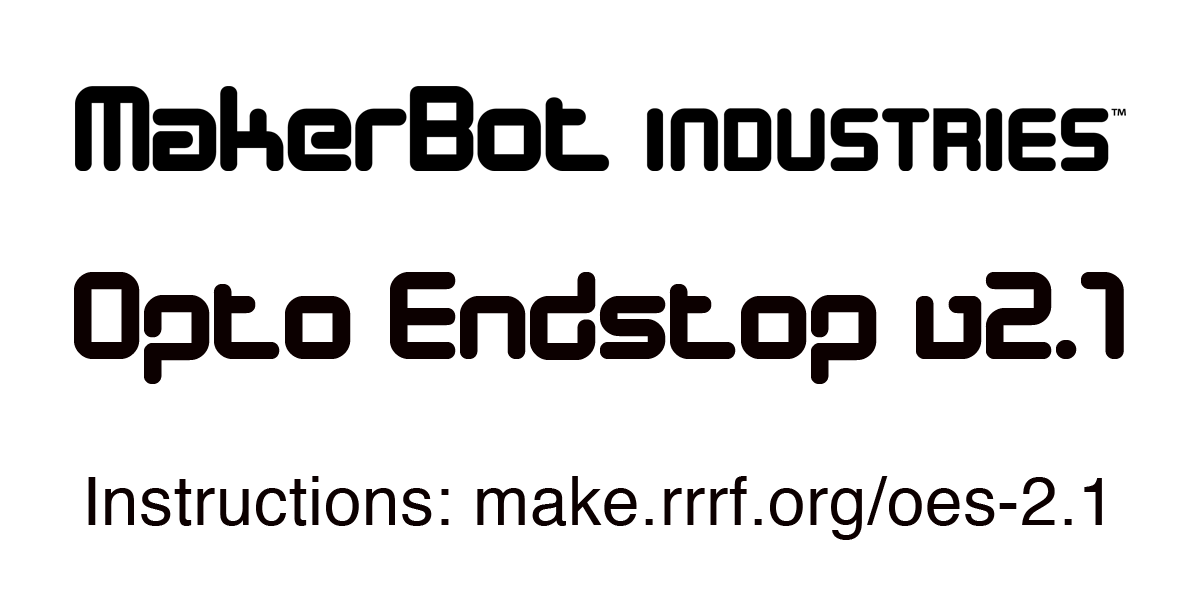
<style>
.page{position:relative;width:1200px;height:600px;background:#ffffff}
.page>*{position:absolute;margin:0}
.t1{font:126.5px "DesignerBlock";letter-spacing:0.01em;color:#0c0000}
.t2{font:67.4px "Helvetica";letter-spacing:0.01em;color:#0c0000}
</style>
<div class="page">
<p class="t1" style="left:74px;top:272px;width:1050px;height:112px">Opto Endstop v2.1</p>
<p class="t2" style="left:88px;top:476px;width:1014px;height:64px">Instructions: make.rrrf.org/oes-2.1</p>
</div>
